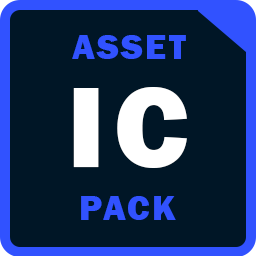
<style>
.page{position:relative;width:256px;height:256px;background:#001626}
.page>*{position:absolute;margin:0}
.t1{font:35.6px "FranklinGothic-Heavy";letter-spacing:0.075em;color:#3152ff}
.t2{font:119px "FranklinGothic-Heavy";letter-spacing:0.075em;color:#ffffff}
</style>
<div class="page">
<p class="t1" style="left:72px;top:35px;width:114px;height:24px">ASSET</p>
<p class="t2" style="left:73px;top:87px;width:114px;height:81px">IC</p>
<p class="t1" style="left:81px;top:196px;width:95px;height:24px">PACK</p>
</div>
